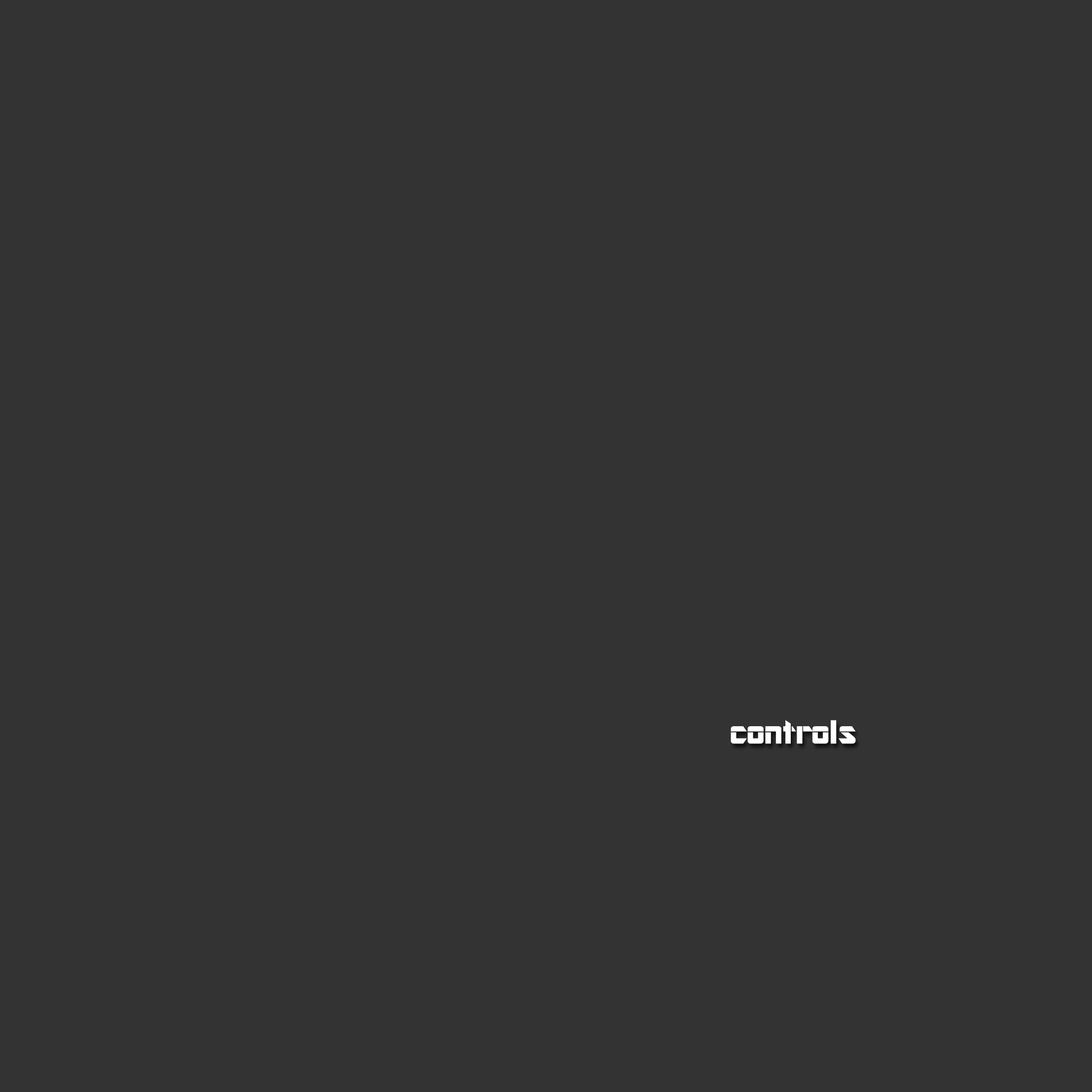
<style>
.page{position:relative;width:1092px;height:1092px;background:#333333}
.page>*{position:absolute;margin:0}
.t1{font:32px "ARDESTINE";color:#ffffff;scale:1.04 1}
</style>
<div class="page">
<p class="t1" style="left:730px;top:720px;width:126px;height:24px">controls</p>
</div>
